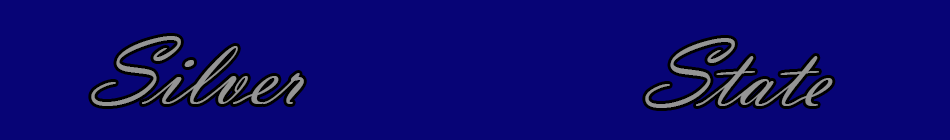
<style>
.page{position:relative;width:950px;height:140px;background:#070476}
.page>*{position:absolute;margin:0}
.t1{font:100px "VladimirScript";color:#959595}
</style>
<div class="page">
<p class="t1" style="left:91px;top:36px;width:213px;height:70px">Silver</p>
<p class="t1" style="left:645px;top:38px;width:188px;height:70px">State</p>
</div>
